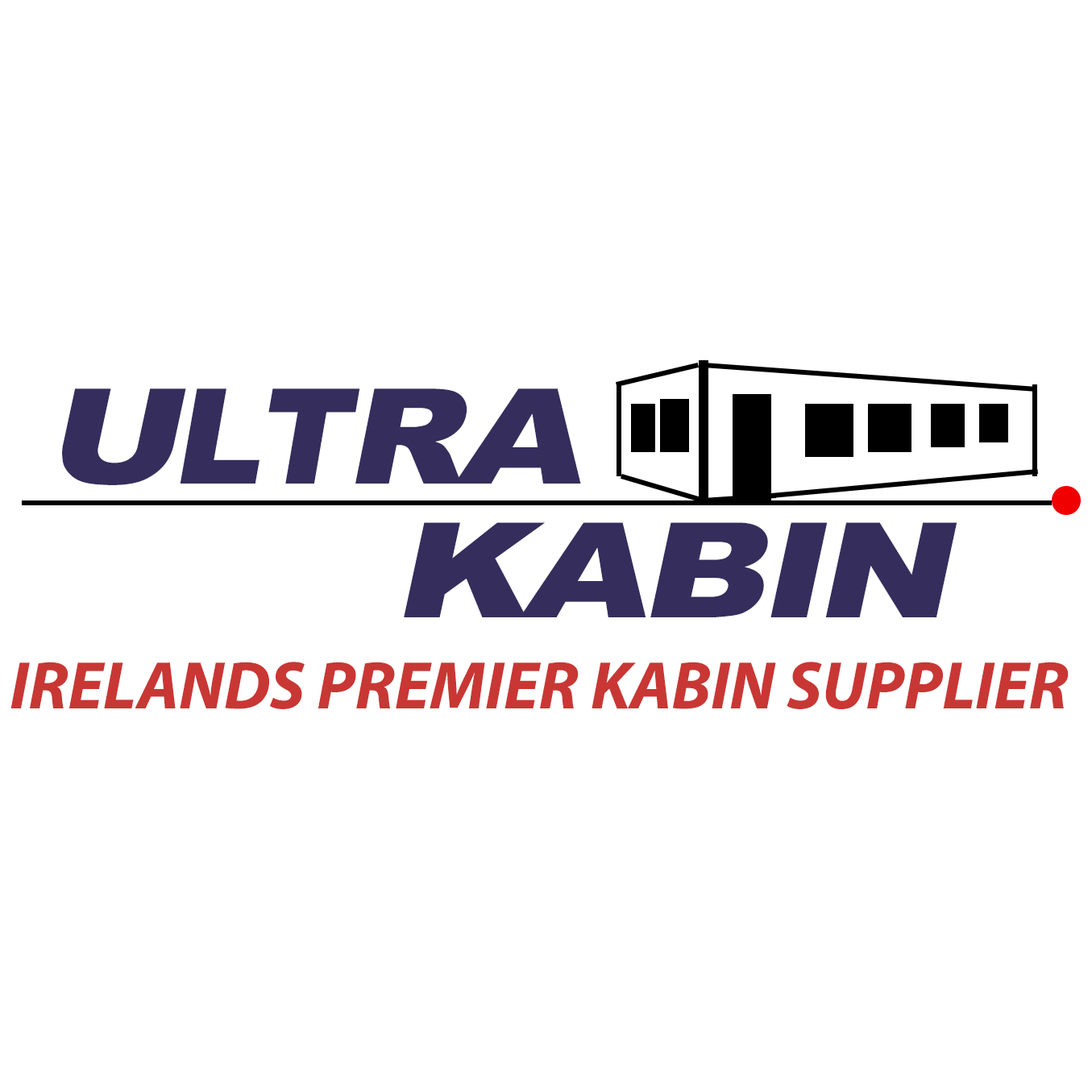
<style>
.page{position:relative;width:1092px;height:1092px;background:#ffffff}
.page>*{position:absolute;margin:0}
.t1{font:132.2px "Arial-Black";letter-spacing:-0.04em;color:#352d5c;font-style:italic;scale:1.22 1}
.t2{font:132.2px "Arial-Black";letter-spacing:-0.04em;color:#352d5c;font-style:italic}
.t3{font:132.2px "Arial-Black";letter-spacing:-0.02em;color:#352d5c;font-style:italic}
.t4{font:132.2px "Arial-Black";letter-spacing:-0.04em;color:#352d5c;font-style:italic;scale:1.13 1}
.t5{font:67.7px "MyriadPro-BoldIt";color:#c83734}
</style>
<div class="page">
<p class="t1" style="left:62px;top:388px;width:519px;height:97px">U<span class="t2">L</span><span class="t3">T</span><span class="t4">R</span>A</p>
<p class="t1" style="left:404px;top:522px;width:553px;height:95px">KABIN</p>
<p class="t5" style="left:10px;top:662px;width:1059px;height:47px">IRELANDS PREMIER KABIN SUPPLIER</p>
</div>
